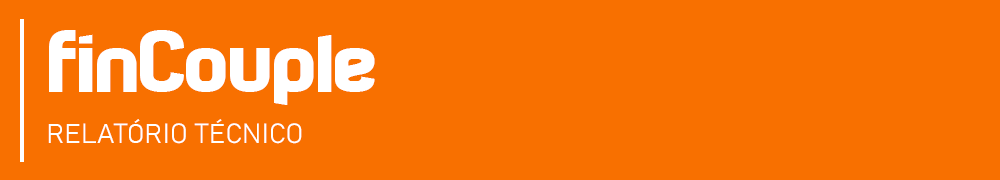
<style>
.page{position:relative;width:1000px;height:180px;background:#f87000}
.page>*{position:absolute;margin:0}
.t1{font:90px "Technoma";color:#ffffff}
.t2{font:27.4px "Bahnschrift-Light";color:#ffffff}
</style>
<div class="page">
<p class="t1" style="left:49px;top:30px;width:326px;height:75px">finCouple</p>
<p class="t2" style="left:48px;top:119px;width:254px;height:25px">RELATÓRIO TÉCNICO</p>
</div>
